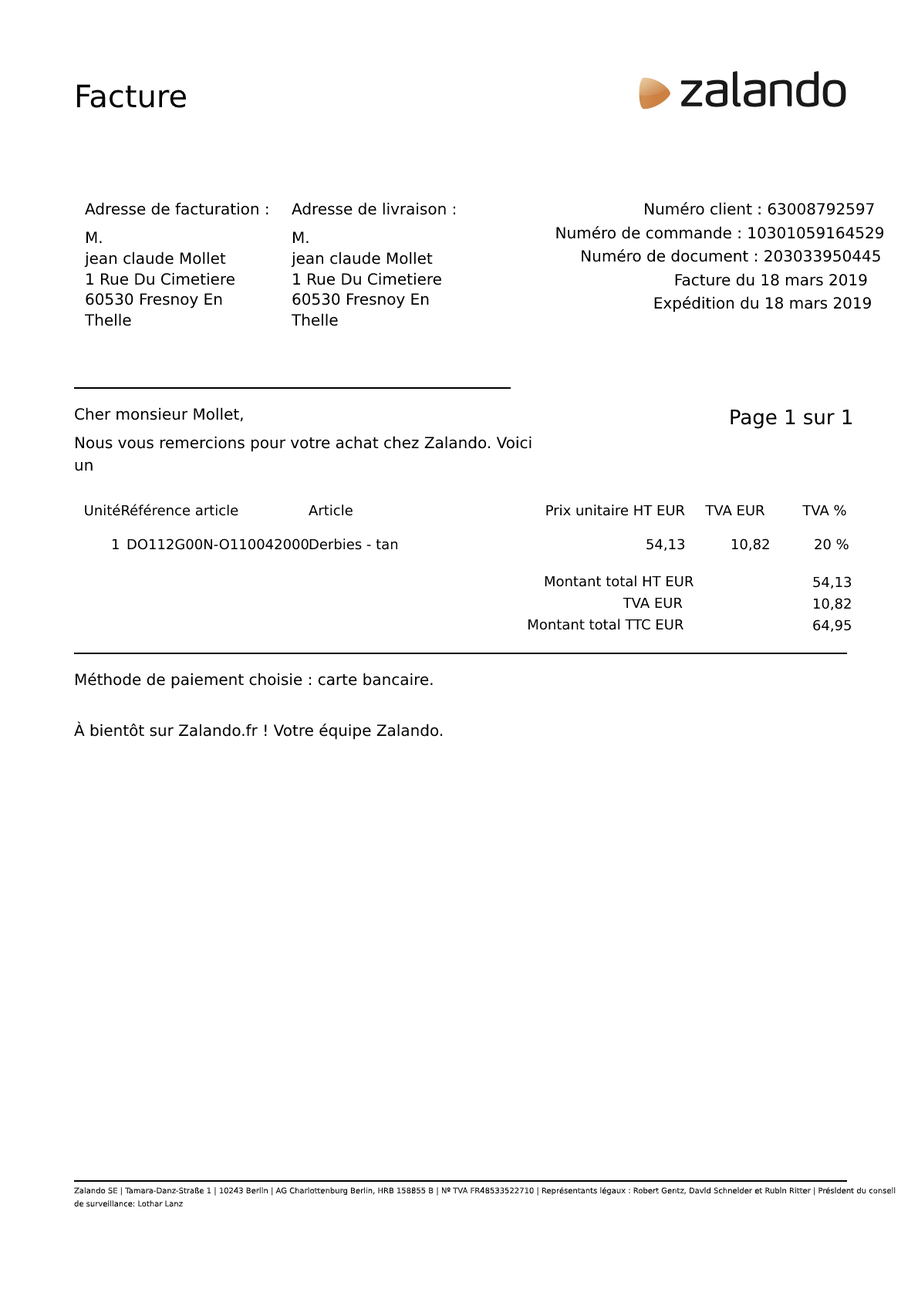
<style>
.page{position:relative;width:918px;height:1299px;background:#ffffff}
.page>*{position:absolute;margin:0}
.t1{font:30.9px "HelveticaNeueLTCom-Bd";color:#000000}
.t2{font:15.4px "HelveticaNeueLTCom-Bd";color:#000000}
.t3{font:15.4px "HelveticaNeueLTCom-Roman";color:#000000}
.t4{font:15.4px/20.5px "HelveticaNeueLTCom-Roman";color:#000000}
.t5{font:20.1px "HelveticaNeueLTCom-Bd";color:#000000}
.t6{font:15.4px/21.6px "HelveticaNeueLTCom-Roman";color:#000000}
.t7{font:13.9px "HelveticaNeueLTCom-Bd";color:#000000}
.t8{font:13.9px "HelveticaNeueLTCom-Roman";color:#000000}
.t9{font:13.9px/21.6px "HelveticaNeueLTCom-Roman";color:#000000}
.t10{font:13.9px/21.6px "HelveticaNeueLTCom-Bd";color:#000000}
.t11{font:7.7px/21.6px "HelveticaNeueLTCom-Bd";color:#000000}
.t12{font:7.7px/13.1px "HelveticaNeueLTCom-Bd";color:#000000}
</style>
<div class="page">
<p class="t1" style="left:76px;top:84px;width:110px;height:24px">Facture</p>
<p class="t2" style="left:85px;top:202px;width:183px;height:13px">Adresse de facturation :</p>
<p class="t2" style="left:292px;top:202px;width:164px;height:13px">Adresse de livraison :</p>
<p class="t3" style="left:645px;top:202px;width:229px;height:13px">Numéro client : 63008792597</p>
<p class="t4" style="left:84px;top:231px;width:151px;height:95px">M.<br>jean claude Mollet<br>1 Rue Du Cimetiere<br>60530 Fresnoy En Thelle<br>France</p>
<p class="t4" style="left:291px;top:231px;width:150px;height:95px"><span class="t3">M.</span><br>jean claude Mollet<br>1 Rue Du Cimetiere<br>60530 Fresnoy En Thelle<br>France</p>
<p class="t3" style="left:556px;top:226px;width:328px;height:13px">Numéro de commande : 10301059164529</p>
<p class="t3" style="left:582px;top:249px;width:298px;height:13px">Numéro de document : 203033950445</p>
<p class="t3" style="left:675px;top:273px;width:192px;height:13px">Facture du 18 mars 2019</p>
<p class="t3" style="left:654px;top:296px;width:217px;height:16px">Expédition du 18 mars 2019</p>
<p class="t3" style="left:75px;top:407px;width:168px;height:15px">Cher monsieur Mollet,</p>
<p class="t5" style="left:731px;top:410px;width:121px;height:19px">Page 1 sur 1</p>
<p class="t4" style="left:75px;top:436px;width:456px;height:35px">Nous vous remercions pour votre achat chez Zalando. Voici un<span class="t6"><br>récapitulatif de votre commande :</span></p>
<p class="t7" style="left:85px;top:504px;width:153px;height:12px">UnitéRéférence article</p>
<p class="t7" style="left:309px;top:504px;width:44px;height:12px">Article</p>
<p class="t7" style="left:546px;top:504px;width:139px;height:12px">Prix unitaire HT EUR</p>
<p class="t7" style="left:705px;top:504px;width:60px;height:12px">TVA EUR</p>
<p class="t7" style="left:802px;top:504px;width:44px;height:12px">TVA %</p>
<p class="t8" style="left:112px;top:538px;width:7px;height:11px">1</p>
<p class="t8" style="left:127px;top:538px;width:182px;height:12px">DO112G00N-O110042000</p>
<p class="t8" style="left:309px;top:538px;width:89px;height:12px">Derbies - tan</p>
<p class="t8" style="left:646px;top:538px;width:39px;height:14px">54,13</p>
<p class="t8" style="left:731px;top:538px;width:38px;height:14px">10,82</p>
<p class="t8" style="left:815px;top:538px;width:34px;height:12px">20 %</p>
<p class="t8" style="left:545px;top:575px;width:148px;height:12px">Montant total HT EUR</p>
<p class="t9" style="left:813px;top:576px;width:39px;height:57px">54,13<br>10,82<span class="t10"><br>64,95</span></p>
<p class="t8" style="left:623px;top:597px;width:60px;height:12px">TVA EUR</p>
<p class="t7" style="left:528px;top:619px;width:155px;height:11px">Montant total TTC EUR</p>
<p class="t3" style="left:75px;top:673px;width:358px;height:16px">Méthode de paiement choisie : carte bancaire.</p>
<p class="t2" style="left:74px;top:721px;width:369px;height:19px">À bientôt sur Zalando.fr ! Votre équipe Zalando.</p>
<p class="t11" style="left:74px;top:1187px;width:822px;height:20px">Zalando SE | Tamara-Danz-Straße 1 | 10243 Berlin | AG Charlottenburg Berlin, HRB 158855 B | Nº TVA FR48533522710 | Représentants légaux : Robert Gentz, David Schneider et Rubin Ritter | Président du conseil<span class="t12"><br>de surveillance: Lothar Lanz</span></p>
</div>
